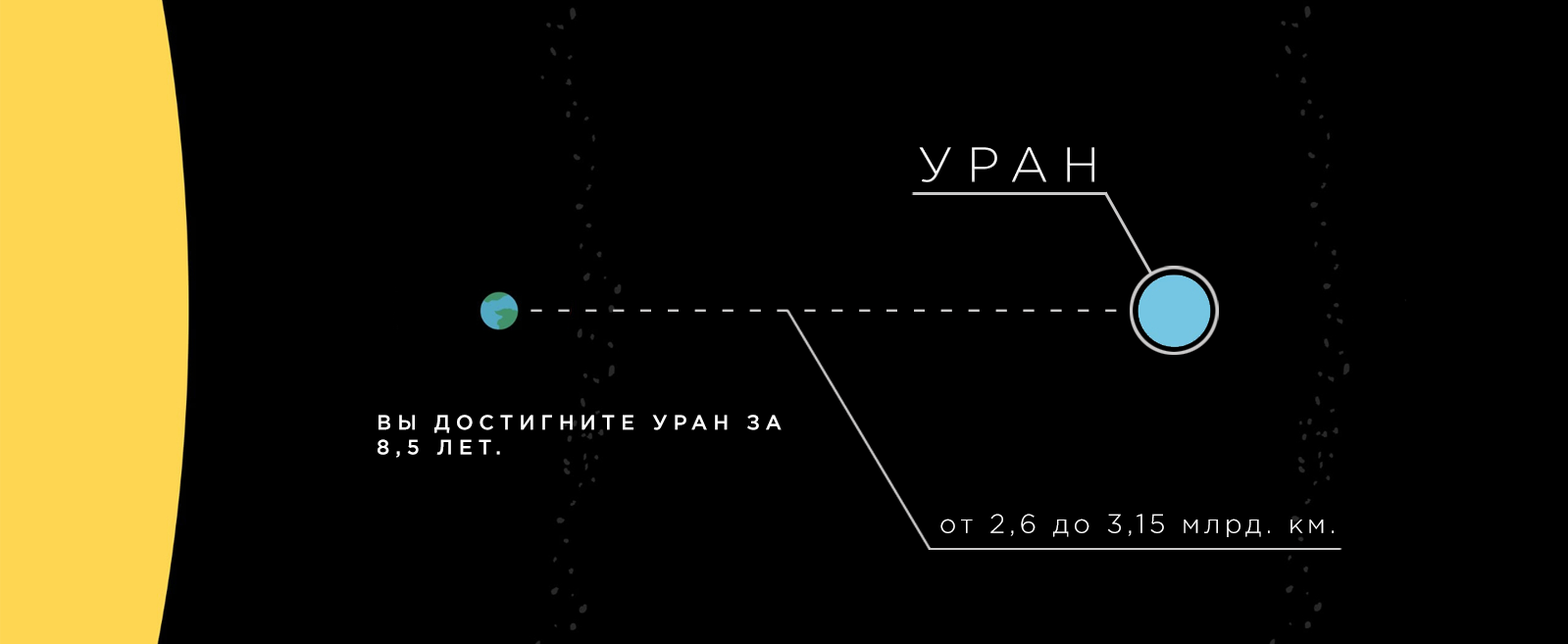
<style>
.page{position:relative;width:1568px;height:644px;background:#000000}
.page>*{position:absolute;margin:0}
.t1{font:49px "GothamPro-Light";letter-spacing:0.28em;color:#ffffff;text-transform:uppercase}
.t2{font:39.8px "GothamPro-Light";letter-spacing:0.28em;color:#cac9c9;text-transform:uppercase}
.t3{font:20.6px "GothamPro-Medium";letter-spacing:0.28em;color:#ffffff;text-transform:uppercase}
.t4{font:26.5px "GothamPro-Light";letter-spacing:0.16em;color:#ffffff}
</style>
<div class="page">
<p class="t1" style="left:919px;top:147px;width:175px;height:35px">уран</p>
<p class="t2" style="left:531px;top:309px;width:586px;height:3px">----------------------</p>
<p class="t3" style="left:378px;top:415px;width:404px;height:43px">ВЫ ДОСТИГНИТЕ уран ЗА 8,5 ЛЕТ.</p>
<p class="t4" style="left:940px;top:514px;width:394px;height:23px">от 2,6 до 3,15 млрд. км.</p>
</div>
